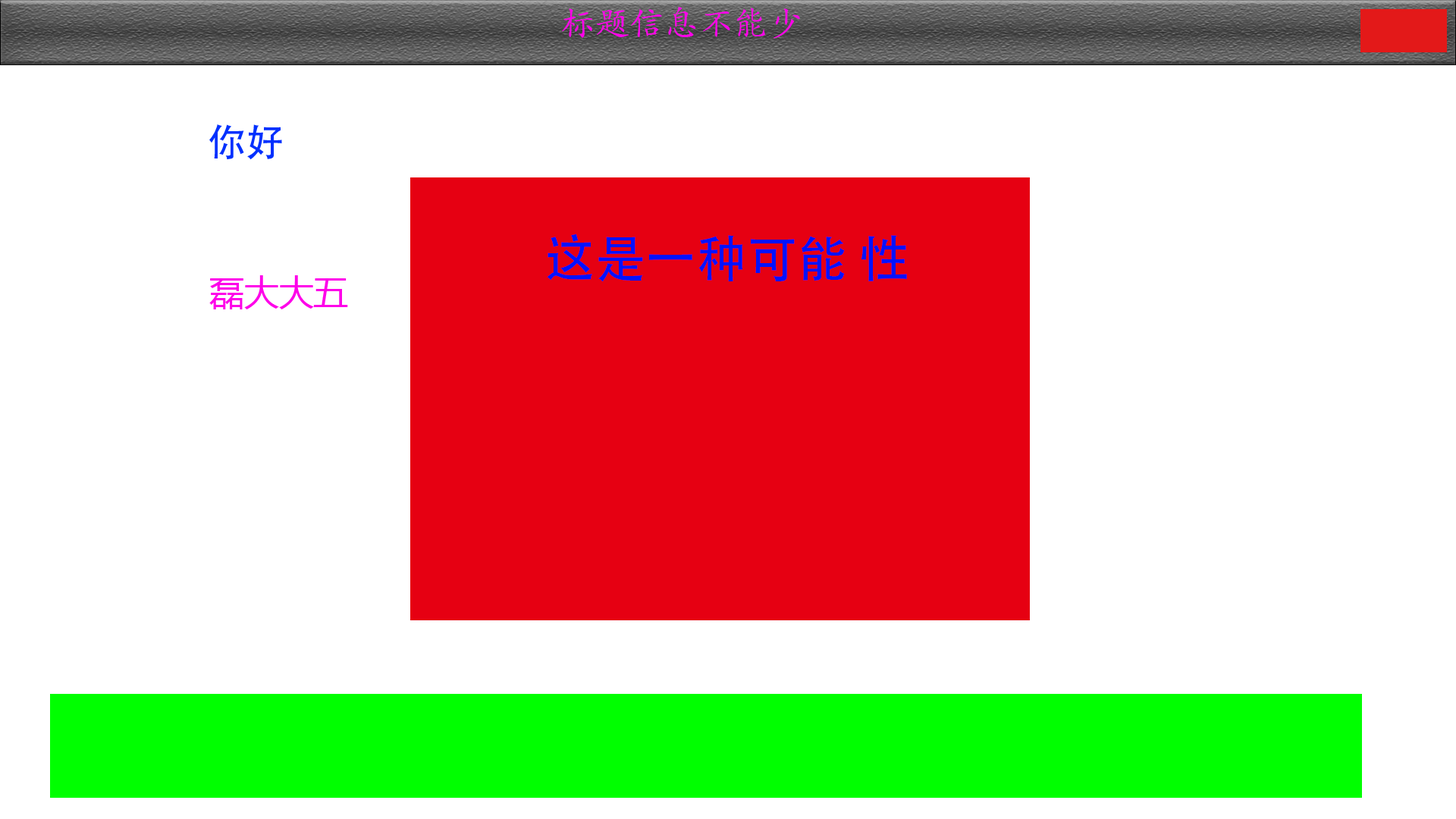
<style>
.page{position:relative;width:1456px;height:819px;background:#ffffff}
.page>*{position:absolute;margin:0}
.t1{font:34.8px "STKaiti";color:#fe00e9}
.t2{font:37.9px "AdobeHeitiStd-Regular";color:#0030fe}
.t3{font:50.6px "AdobeHeitiStd-Regular";color:#0012ff}
.t4{font:34.8px "MicrosoftYaHeiUI";color:#fe00e9}
</style>
<div class="page">
<p class="t1" style="left:562px;top:7px;width:238px;height:32px">标题信息不能少</p>
<p class="t2" style="left:209px;top:124px;width:73px;height:36px">你好</p>
<p class="t3" style="left:547px;top:234px;width:360px;height:48px">这是一种可能 性</p>
<p class="t4" style="left:209px;top:275px;width:139px;height:34px">磊大大五</p>
</div>
